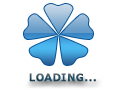
<style>
.page{position:relative;width:120px;height:90px;background:#ffffff}
.page>*{position:absolute;margin:0}
.t1{font:10px "MeiryoUI-Bold";letter-spacing:0.05em;font-weight:bold}
</style>
<div class="page">
<p class="t1" style="left:29px;top:73px;width:67px;height:9px">LOADING...</p>
</div>
